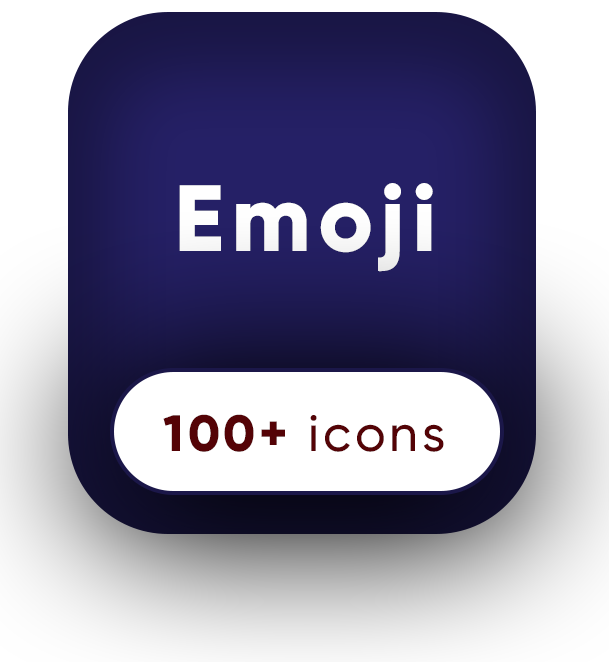
<style>
.page{position:relative;width:609px;height:662px;background:#ffffff}
.page>*{position:absolute;margin:0}
.t1{font:93.8px "Gilroy-ExtraBold";letter-spacing:0.075em;color:#fdfdfd}
.t2{font:50.9px "Gilroy-Medium";letter-spacing:0.075em;color:#540306}
.t3{font:50.9px "Gilroy-ExtraBold";letter-spacing:0.075em;color:#540306}
</style>
<div class="page">
<p class="t1" style="left:179px;top:183px;width:254px;height:89px">Emoji</p>
<p class="t2" style="left:163px;top:414px;width:281px;height:38px"><span class="t3">100+ </span>icons</p>
</div>
